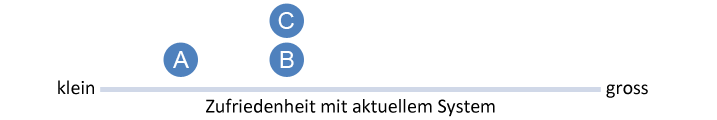
<style>
.page{position:relative;width:717px;height:120px;background:#ffffff}
.page>*{position:absolute;margin:0}
.t1{font:24px "ArialMT";color:#ffffff}
.t2{font:20px "Calibri";color:#000000}
</style>
<div class="page">
<p class="t1" style="left:278px;top:12px;width:16px;height:17px">C</p>
<p class="t1" style="left:173px;top:51px;width:16px;height:17px">A</p>
<p class="t1" style="left:280px;top:51px;width:14px;height:17px">B</p>
<p class="t2" style="left:58px;top:80px;width:36px;height:15px">klein</p>
<p class="t2" style="left:606px;top:84px;width:42px;height:14px">gross</p>
<p class="t2" style="left:206px;top:98px;width:289px;height:19px">Zufriedenheit mit aktuellem System</p>
</div>
